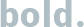
<style>
.page{position:relative;width:84px;height:27px;background:#ffffff}
.page>*{position:absolute;margin:0}
.t1{font:36px "Roboto-Black";letter-spacing:0.04em;color:#b0bec5}
</style>
<div class="page">
<p class="t1" style="left:0px;top:0px;width:84px;height:27px">bold.</p>
</div>
